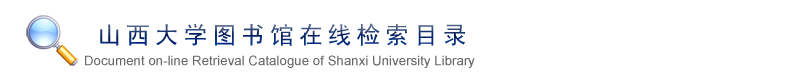
<style>
.page{position:relative;width:800px;height:80px;background:#ffffff}
.page>*{position:absolute;margin:0}
.t1{font:24px "SimHei";letter-spacing:0.2em}
.t2{font:13.3px "ArialMT";color:#666666}
</style>
<div class="page">
<p class="t1" style="left:100px;top:23px;width:365px;height:23px">山西大学图书馆在线检索目录</p>
<p class="t2" style="left:85px;top:55px;width:390px;height:13px">Document on-line Retrieval Catalogue of Shanxi University Library</p>
</div>
